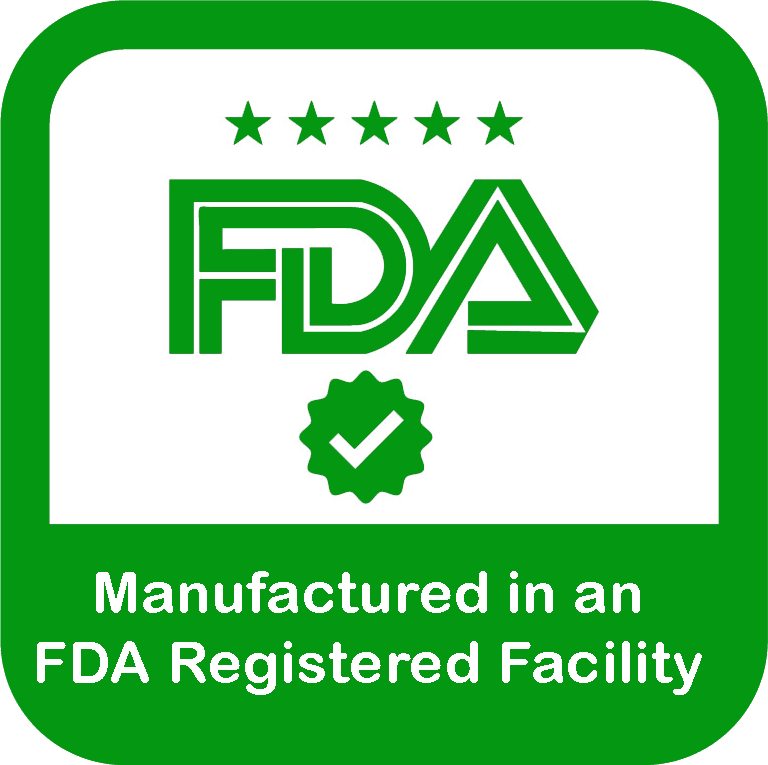
<style>
.page{position:relative;width:768px;height:765px;background:#049711}
.page>*{position:absolute;margin:0}
.t1{font:58.3px "ArialRoundedMTBold";letter-spacing:0.01em;color:#ffffff}
</style>
<div class="page">
<p class="t1" style="left:37px;top:571px;width:665px;height:124px;text-align:center">Manufactured in an FDA Registered Facility</p>
</div>
